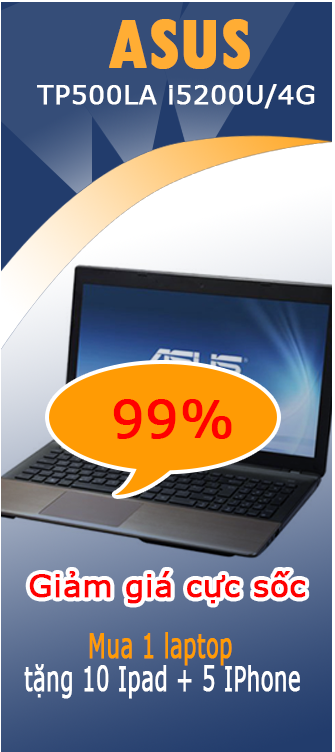
<style>
.page{position:relative;width:335px;height:752px}
.page>*{position:absolute;margin:0}
.t1{font:77px "TwCenMT-CondensedBold";color:#ffad34;font-weight:bold}
.t2{font:26.3px "Verdana";color:#ffffff;font-weight:bold}
.t3{font:50.8px "Verdana";color:#ff0000;font-weight:bold}
.t4{font:31px "Verdana";color:#ff0000;font-weight:bold}
.t5{font:34px/32.9px "Verdana";color:#ffffff;font-weight:bold;scale:0.62 1}
.t6{font:34px/32.9px "Verdana";color:#ff9b04;font-weight:bold;scale:0.62 1}
</style>
<div class="page">
<p class="t1" style="left:109px;top:19px;width:141px;height:50px">ASUS</p>
<p class="t2" style="left:37px;top:84px;width:278px;height:25px">TP500LA i5200U/4G</p>
<p class="t3" style="left:113px;top:399px;width:119px;height:40px">99%</p>
<p class="t4" style="left:29px;top:571px;width:277px;height:33px">Giảm giá cực sốc</p>
<p class="t5" style="left:24px;top:632px;width:276px;height:67px"><span class="t6">Mua 1 laptop <br></span>tặng 10 Ipad + 5 IPhone</p>
</div>
